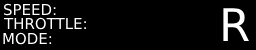
<style>
.page{position:relative;width:256px;height:50px;background:#000000}
.page>*{position:absolute;margin:0}
.t1{font:15px "DejaVuSans";color:#ffffff}
.t2{font:45px "DejaVuSans";color:#ffffff}
</style>
<div class="page">
<p class="t1" style="left:3px;top:3px;width:53px;height:13px">SPEED:</p>
<p class="t1" style="left:3px;top:17px;width:83px;height:13px">THROTTLE:</p>
<p class="t2" style="left:223px;top:8px;width:26px;height:33px">R</p>
<p class="t1" style="left:3px;top:32px;width:49px;height:13px">MODE:</p>
</div>
